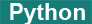
<style>
.page{position:relative;width:92px;height:24px;background:#157c78}
.page>*{position:absolute;margin:0}
.t1{font:22.9px "Arial-BoldMT";color:#fefefe}
</style>
<div class="page">
<p class="t1" style="left:10px;top:3px;width:75px;height:22px">Python</p>
</div>
